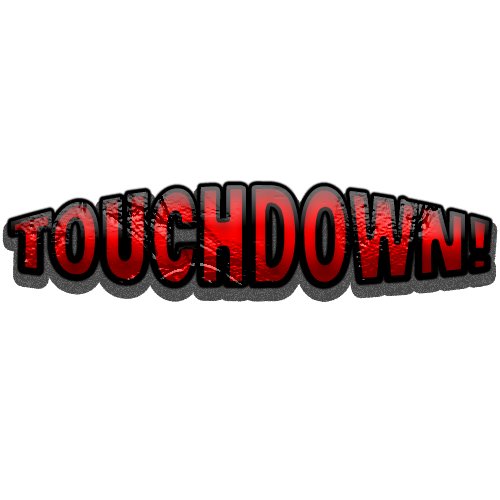
<style>
.page{position:relative;width:500px;height:500px;background:#ffffff}
.page>*{position:absolute;margin:0}
.t1{font:62.5px "BowlbyOneSC-Regular"}
</style>
<div class="page">
<p class="t1" style="left:11px;top:185px;width:479px;height:101px">TOUCHDOWN!</p>
</div>
